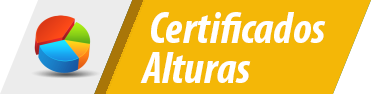
<style>
.page{position:relative;width:371px;height:94px;background:#f4b707}
.page>*{position:absolute;margin:0}
.t1{font:45.1px "MyriadPro-BoldCondIt";color:#ffffff}
</style>
<div class="page">
<p class="t1" style="left:151px;top:12px;width:175px;height:31px">Certificados</p>
<p class="t1" style="left:140px;top:52px;width:111px;height:31px">Alturas</p>
</div>
